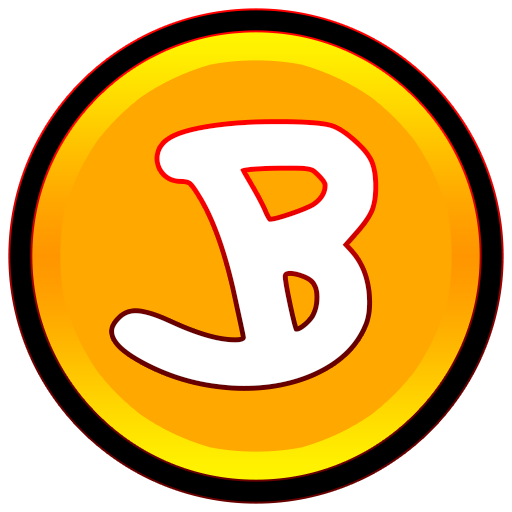
<style>
.page{position:relative;width:512px;height:512px;background:#ffffff}
.page>*{position:absolute;margin:0}
.t1{font:510.7px "Brutal_bounce-Regular";color:#ffffff}
</style>
<div class="page">
<p class="t1" style="left:114px;top:124px;width:260px;height:262px">B</p>
</div>
